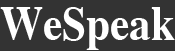
<style>
.page{position:relative;width:175px;height:51px;background:#333333}
.page>*{position:absolute;margin:0}
.t1{font:48.3px "Times-Narrow-Bold";color:#ffffff;scale:1.05 1}
</style>
<div class="page">
<p class="t1" style="left:0px;top:7px;width:175px;height:43px">WeSpeak</p>
</div>
